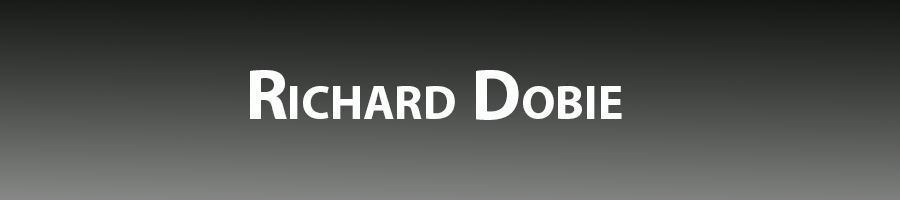
<style>
.page{position:relative;width:900px;height:200px}
.page>*{position:absolute;margin:0}
.t1{font:48px "MyriadPro-Bold";color:#ffffff}
.t2{font:72px "MyriadPro-Bold";color:#fefefe}
.t3{font:48px "MyriadPro-Bold";color:#fefefe}
</style>
<div class="page">
<p class="t1" style="left:250px;top:70px;width:372px;height:50px"><span class="t2">R</span>ICHARD<span class="t2"> D</span><span class="t3">OBIE</span></p>
</div>
